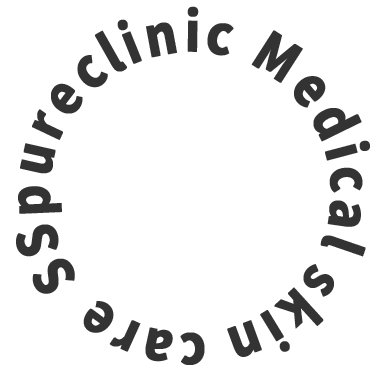
<style>
.page{position:relative;width:380px;height:380px;background:#ffffff}
.page>*{position:absolute;margin:0}
.t1{font:54px "NotoSansKR-ExtraBold";color:#333333;font-weight:bold;scale:0.9 1}
</style>
<div class="page">
<p class="t1" style="left:16px;top:6px;width:354px;height:359px;rotate:15deg">SSpureclinic Medical skin care care</p>
</div>
